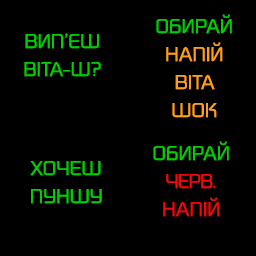
<style>
.page{position:relative;width:256px;height:256px;background:#000000}
.page>*{position:absolute;margin:0}
.t1{font:20.9px/28px "DigitalSansNowMLPro-Reg";letter-spacing:-0.025em;color:#ff9e19}
.t2{font:20.9px/28px "DigitalSansNowMLPro-Reg";letter-spacing:-0.025em;color:#00ce00}
.t3{font:20.9px/28px "DigitalSansNowMLPro-Reg";letter-spacing:-0.075em;color:#ef0808}
.t4{font:20.9px/28px "DigitalSansNowMLPro-Reg";letter-spacing:-0.025em;color:#ef0808}
</style>
<div class="page">
<p class="t1" style="left:156px;top:14px;width:76px;height:104px;text-align:center"><span class="t2">ОБИРАЙ<br></span>НАПІЙ<br>ВІТА<br>ШОК</p>
<p class="t2" style="left:24px;top:33px;width:77px;height:44px;text-align:center">ВИП’ЄШ<br>ВІТА-Ш?</p>
<p class="t2" style="left:153px;top:141px;width:76px;height:76px;text-align:center">ОБИРАЙ<br><span class="t3">ЧЕРВ.<br></span><span class="t4">НАПІЙ</span></p>
<p class="t2" style="left:30px;top:161px;width:72px;height:43px;text-align:center">ХОЧЕШ<br>ПУНШУ</p>
</div>
